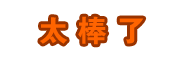
<style>
.page{position:relative;width:182px;height:61px;background:#ffffff}
.page>*{position:absolute;margin:0}
.t1{font:30px "Jdahei";letter-spacing:0.3em;color:#ff6400}
</style>
<div class="page">
<p class="t1" style="left:40px;top:16px;width:104px;height:29px">太棒了</p>
</div>
